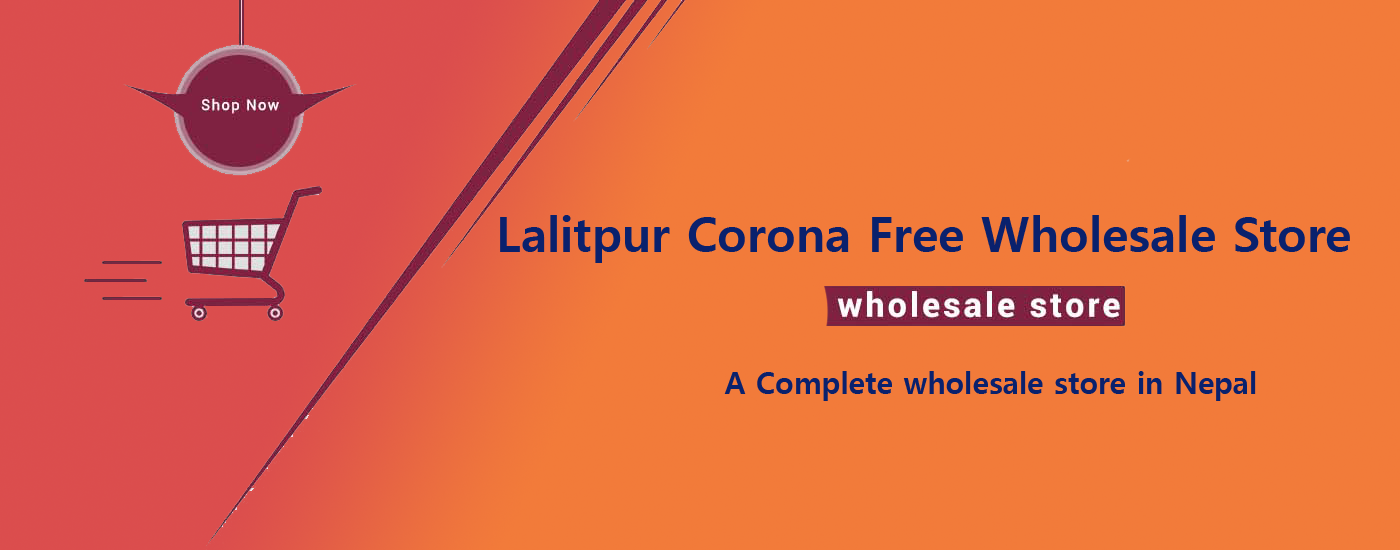
<style>
.page{position:relative;width:1400px;height:550px;background:#f27b3a}
.page>*{position:absolute;margin:0}
.t1{font:48px "MalgunGothicBold";color:#0a216d}
.t2{font:30px "MalgunGothicBold";color:#0a216d}
</style>
<div class="page">
<p class="t1" style="left:500px;top:215px;width:850px;height:48px">Lalitpur Corona Free Wholesale Store</p>
<p class="t2" style="left:724px;top:371px;width:532px;height:30px">A Complete wholesale store in Nepal</p>
</div>
